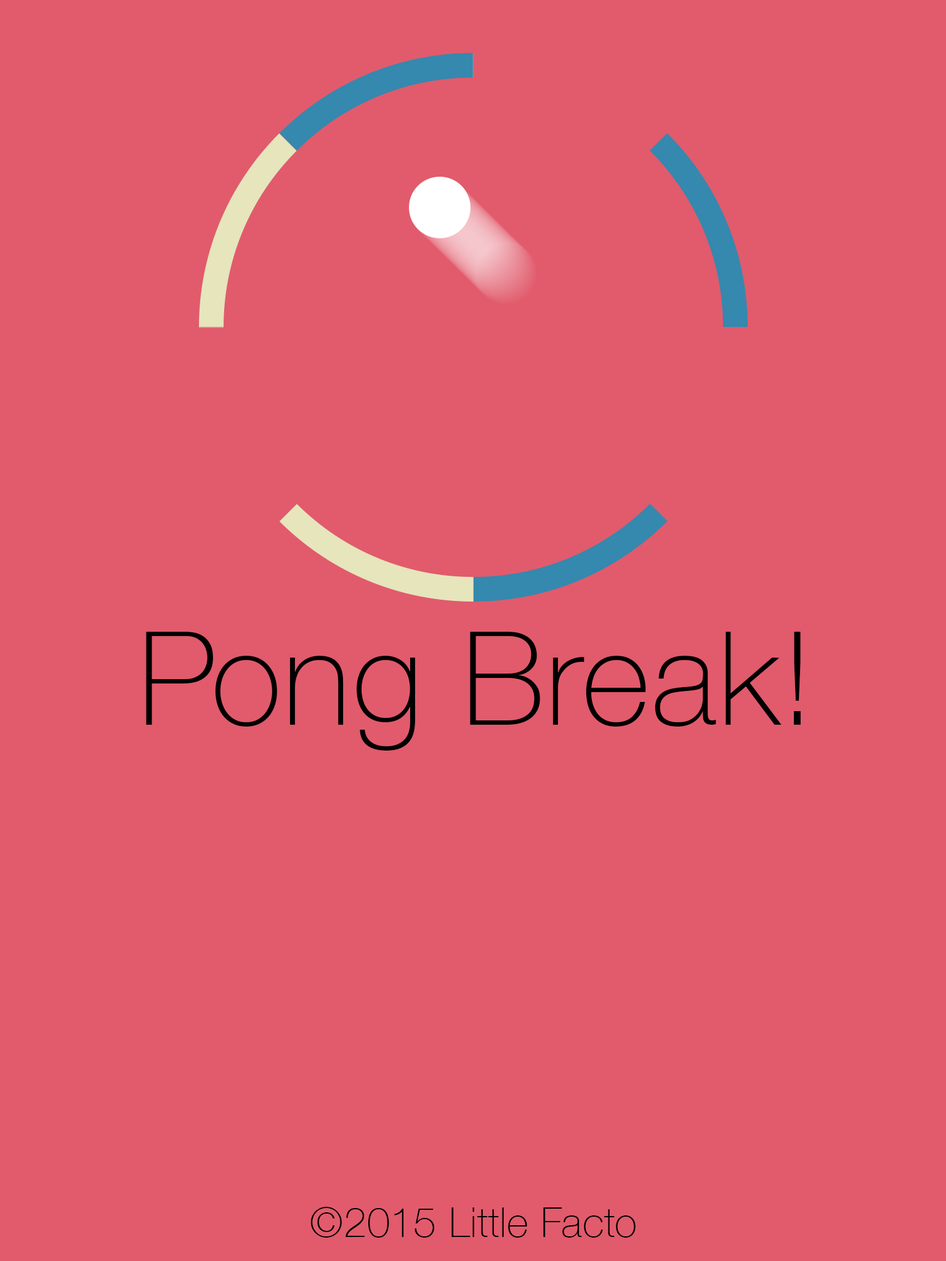
<style>
.page{position:relative;width:946px;height:1261px;background:#e15b6c}
.page>*{position:absolute;margin:0}
.t1{font:130.3px "HelveticaNeue-Thin";letter-spacing:0.013em;color:#000000}
.t2{font:41px "HelveticaNeue-Thin";letter-spacing:0.013em;color:#000000}
</style>
<div class="page">
<p class="t1" style="left:146px;top:632px;width:654px;height:119px">Pong Break!</p>
<p class="t2" style="left:310px;top:1207px;width:325px;height:31px">©2015 Little Facto</p>
</div>
